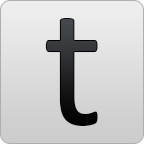
<style>
.page{position:relative;width:144px;height:144px}
.page>*{position:absolute;margin:0}
.t1{font:180px "Calibri"}
</style>
<div class="page">
<p class="t1" style="left:45px;top:18px;width:53px;height:108px">t</p>
</div>
